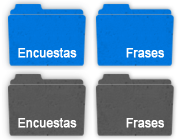
<style>
.page{position:relative;width:180px;height:140px}
.page>*{position:absolute;margin:0}
.t1{font:12px "ArialMT";color:#ffffff;font-weight:bold}
</style>
<div class="page">
<p class="t1" style="left:18px;top:48px;width:59px;height:10px">Encuestas</p>
<p class="t1" style="left:126px;top:48px;width:38px;height:10px">Frases</p>
<p class="t1" style="left:18px;top:118px;width:59px;height:10px">Encuestas</p>
<p class="t1" style="left:126px;top:118px;width:38px;height:10px">Frases</p>
</div>
